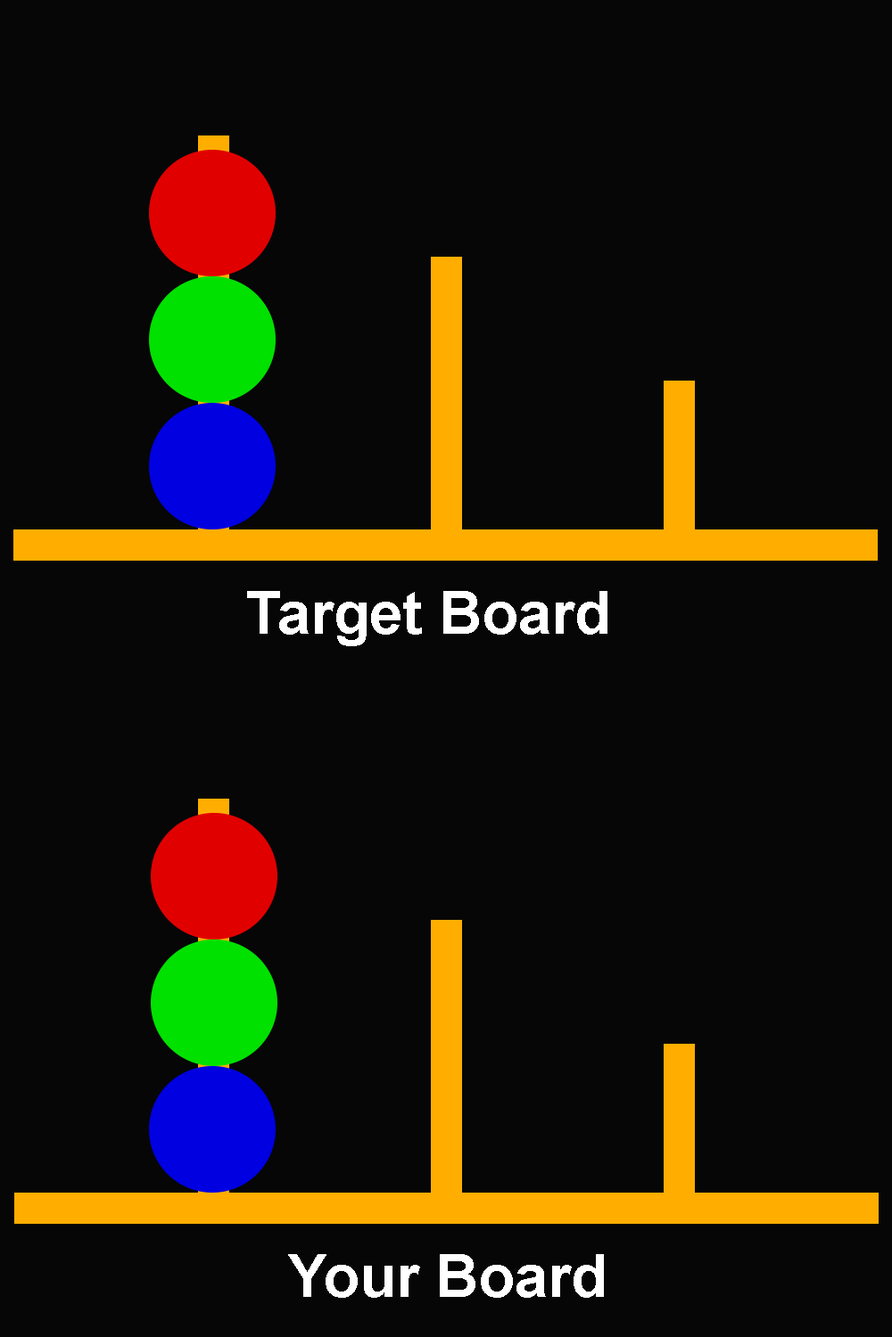
<style>
.page{position:relative;width:892px;height:1337px;background:#060606}
.page>*{position:absolute;margin:0}
.t1{font:59.4px "Arial-BoldMT";color:#ffffff}
</style>
<div class="page">
<p class="t1" style="left:247px;top:591px;width:360px;height:55px">Target Board</p>
<p class="t1" style="left:288px;top:1254px;width:316px;height:44px">Your Board</p>
</div>
